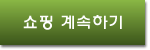
<style>
.page{position:relative;width:150px;height:50px}
.page>*{position:absolute;margin:0}
.t1{font:16px "HYwulM";color:#fefefe}
</style>
<div class="page">
<p class="t1" style="left:23px;top:15px;width:99px;height:15px">쇼핑 계속하기</p>
</div>
